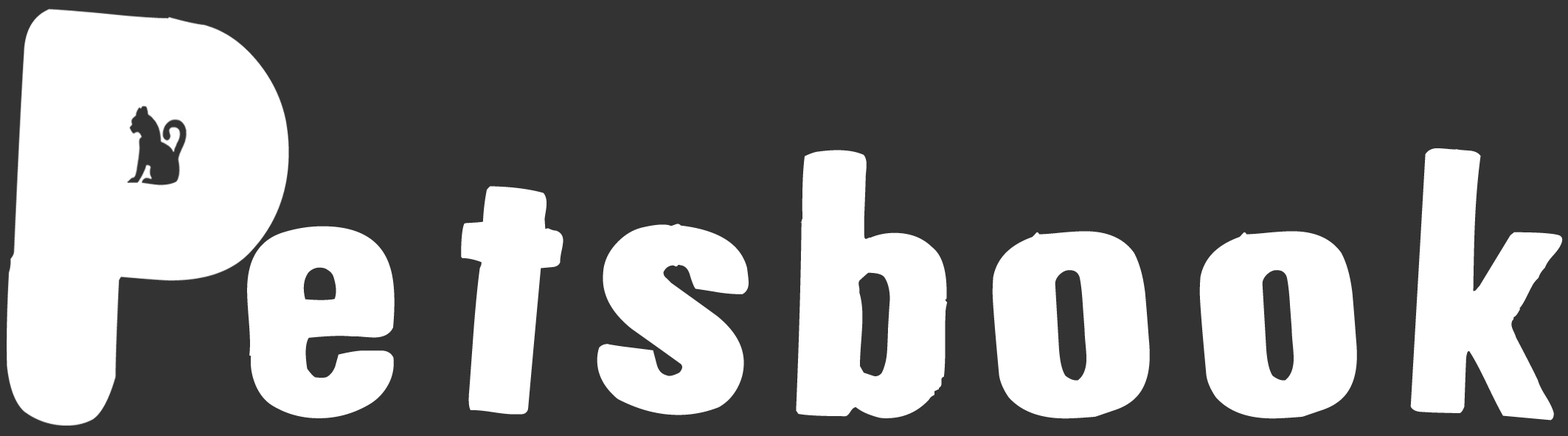
<style>
.page{position:relative;width:1568px;height:436px;background:#333333}
.page>*{position:absolute;margin:0}
.t1{font:333.4px "AlphaFridgeMagnets";letter-spacing:0.12em;color:#ffffff;scale:0.95 1}
</style>
<div class="page">
<p class="t1" style="left:247px;top:148px;width:1316px;height:272px">etsbook</p>
</div>
